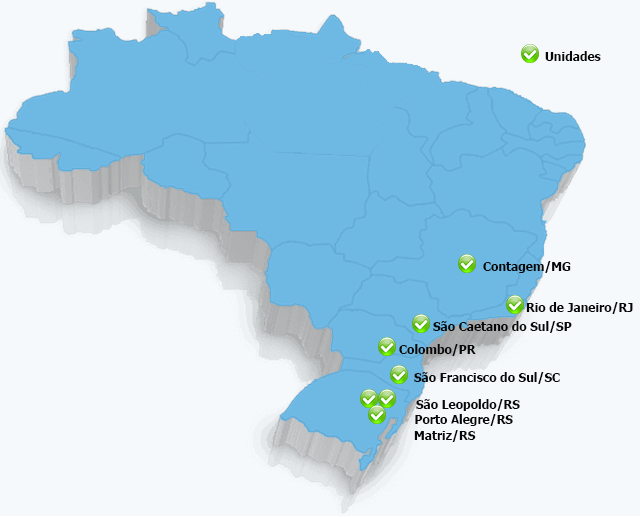
<style>
.page{position:relative;width:640px;height:517px;background:#f5f9fb}
.page>*{position:absolute;margin:0}
.t1{font:12px "Tahoma-Bold";color:#070707}
</style>
<div class="page">
<p class="t1" style="left:545px;top:51px;width:56px;height:10px">Unidades</p>
<p class="t1" style="left:483px;top:261px;width:88px;height:12px">Contagem/MG</p>
<p class="t1" style="left:526px;top:302px;width:107px;height:12px">Rio de Janeiro/RJ</p>
<p class="t1" style="left:433px;top:321px;width:139px;height:12px">São Caetano do Sul/SP</p>
<p class="t1" style="left:399px;top:344px;width:77px;height:12px">Colombo/PR</p>
<p class="t1" style="left:414px;top:372px;width:146px;height:12px">São Francisco do Sul/SC</p>
<p class="t1" style="left:416px;top:399px;width:104px;height:12px">São Leopoldo/RS</p>
<p class="t1" style="left:415px;top:414px;width:98px;height:12px">Porto Alegre/RS</p>
<p class="t1" style="left:414px;top:430px;width:62px;height:12px">Matriz/RS</p>
</div>
